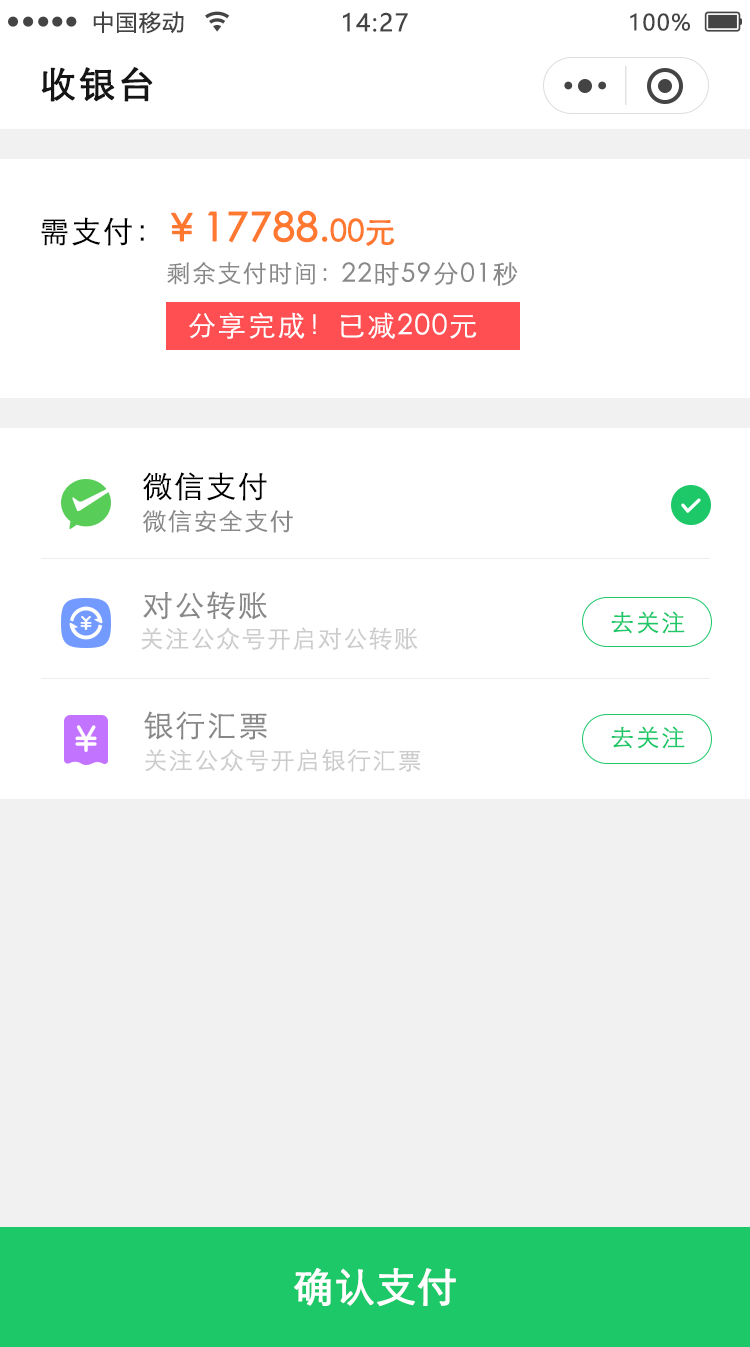
<style>
.page{position:relative;width:750px;height:1347px;background:#ffffff}
.page>*{position:absolute;margin:0}
.t1{font:22px "MicrosoftYaHei";letter-spacing:0.06em;color:#444444}
.t2{font:24px "MicrosoftYaHei";letter-spacing:0.06em;color:#444444}
.t3{font:36px "STXihei";letter-spacing:0.06em;color:#151515;font-weight:bold}
.t4{font:30px "STXihei";letter-spacing:0.06em;color:#000000}
.t5{font:40px "STXihei";color:#ff782f;font-weight:bold}
.t6{font:36px "STXihei";color:#ff782f;font-weight:bold}
.t7{font:30px "STXihei";color:#ff782f;font-weight:bold}
.t8{font:24px "STXihei";letter-spacing:0.06em;color:#888888}
.t9{font:26px "STXihei";letter-spacing:0.06em;color:#888888}
.t10{font:28px "STXihei";letter-spacing:0.06em;color:#ffffff}
.t11{font:30px "STXihei";letter-spacing:0.06em;color:#888888}
.t12{font:24px "STXihei";letter-spacing:0.06em;color:#1dc869}
.t13{font:24px "STXihei";letter-spacing:0.06em;color:#cccccc}
.t14{font:40px "STXihei";color:#ffffff;font-weight:bold}
</style>
<div class="page">
<p class="t1" style="left:93px;top:11px;width:91px;height:23px">中国移动</p>
<p class="t2" style="left:343px;top:12px;width:65px;height:20px">14:27</p>
<p class="t1" style="left:630px;top:13px;width:60px;height:18px">100%</p>
<p class="t3" style="left:41px;top:67px;width:112px;height:35px">收银台</p>
<p class="t4" style="left:41px;top:217px;width:103px;height:29px">需支付：</p>
<p class="t5" style="left:171px;top:210px;width:224px;height:36px">￥17788<span class="t6">.</span><span class="t7">00元</span></p>
<p class="t8" style="left:167px;top:262px;width:160px;height:23px">剩余支付时间：</p>
<p class="t9" style="left:342px;top:261px;width:176px;height:25px">22时59分01秒</p>
<p class="t10" style="left:189px;top:312px;width:288px;height:27px">分享完成！已减200元</p>
<p class="t4" style="left:143px;top:472px;width:124px;height:29px">微信支付</p>
<p class="t8" style="left:143px;top:510px;width:150px;height:23px">微信安全支付</p>
<p class="t11" style="left:143px;top:591px;width:124px;height:29px">对公转账</p>
<p class="t12" style="left:611px;top:611px;width:74px;height:23px">去关注</p>
<p class="t13" style="left:141px;top:627px;width:277px;height:23px">关注公众号开启对公转账</p>
<p class="t11" style="left:144px;top:711px;width:123px;height:29px">银行汇票</p>
<p class="t12" style="left:611px;top:726px;width:74px;height:23px">去关注</p>
<p class="t13" style="left:145px;top:749px;width:275px;height:23px">关注公众号开启银行汇票</p>
<p class="t14" style="left:294px;top:1267px;width:162px;height:40px">确认支付</p>
</div>
